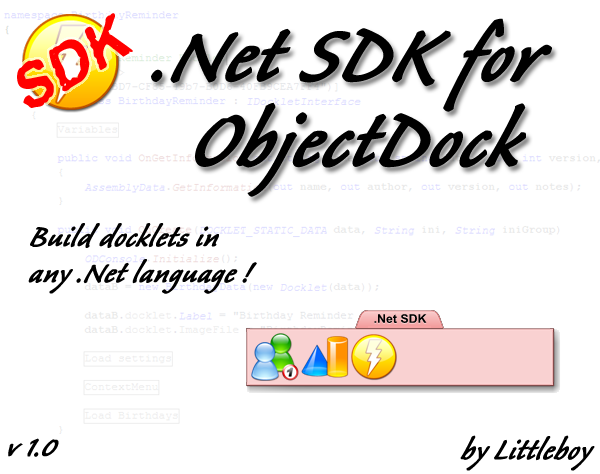
<style>
.page{position:relative;width:600px;height:474px;background:#ffffff}
.page>*{position:absolute;margin:0}
.t1{font:60px "Stamped!";color:#ff0000;font-weight:bold;font-style:italic}
.t2{font:96px/85px "CalibanStd";color:#000000;font-weight:bold;font-style:italic}
.t3{font:36px/36px "CalibanStd";color:#000000;font-weight:bold;font-style:italic}
.t4{font:36px "CalibanStd";color:#000000;font-weight:bold;font-style:italic}
</style>
<div class="page">
<p class="t1" style="left:17px;top:13px;width:116px;height:95px;rotate:-31deg">SDK</p>
<p class="t2" style="left:151px;top:18px;width:401px;height:179px">.Net SDK for<br>  ObjectDock</p>
<p class="t3" style="left:28px;top:223px;width:229px;height:71px">Build docklets in <br>any .Net language !</p>
<p class="t4" style="left:8px;top:438px;width:51px;height:19px">v 1.0</p>
<p class="t4" style="left:460px;top:435px;width:135px;height:36px">by Littleboy</p>
</div>
